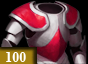
<style>
.page{position:relative;width:88px;height:64px}
.page>*{position:absolute;margin:0}
.t1{font:14px "TimesNewRomanPS-BoldMT";color:#ffffff}
</style>
<div class="page">
<p class="t1" style="left:6px;top:52px;width:20px;height:10px">100</p>
</div>
